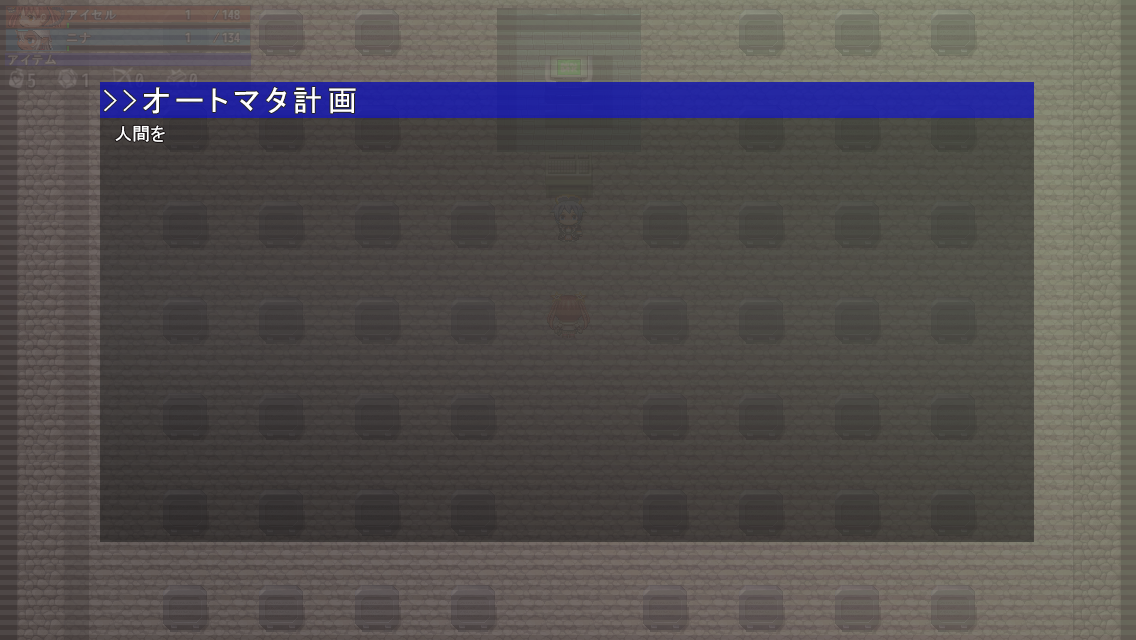
<style>
.page{position:relative;width:1136px;height:640px}
.page>*{position:absolute;margin:0}
.t1{font:30px "MS-PGothic";letter-spacing:0.16em;color:#ffffff}
.t2{font:18px "MS-PGothic";color:#ffffff}
</style>
<div class="page">
<p class="t1" style="left:104px;top:87px;width:252px;height:27px">&gt;&gt;オートマタ計画</p>
<p class="t2" style="left:115px;top:125px;width:50px;height:17px">人間を</p>
</div>
